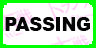
<style>
.page{position:relative;width:96px;height:48px;background:#ffffff}
.page>*{position:absolute;margin:0}
.t1{font:19.3px "Arial-Black";color:#050505;scale:0.91 1}
</style>
<div class="page">
<p class="t1" style="left:5px;top:17px;width:85px;height:14px">PASSING</p>
</div>
